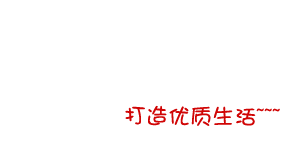
<style>
.page{position:relative;width:300px;height:150px;background:#ffffff}
.page>*{position:absolute;margin:0}
.t1{font:22px "DFPShaoNvW5";color:#d00505}
.t2{font:24px "DFPShaoNvW5";color:#d00505}
</style>
<div class="page">
<p class="t1" style="left:125px;top:105px;width:155px;height:21px;rotate:1deg">打造优质生活<span class="t2">~~~</span></p>
</div>
